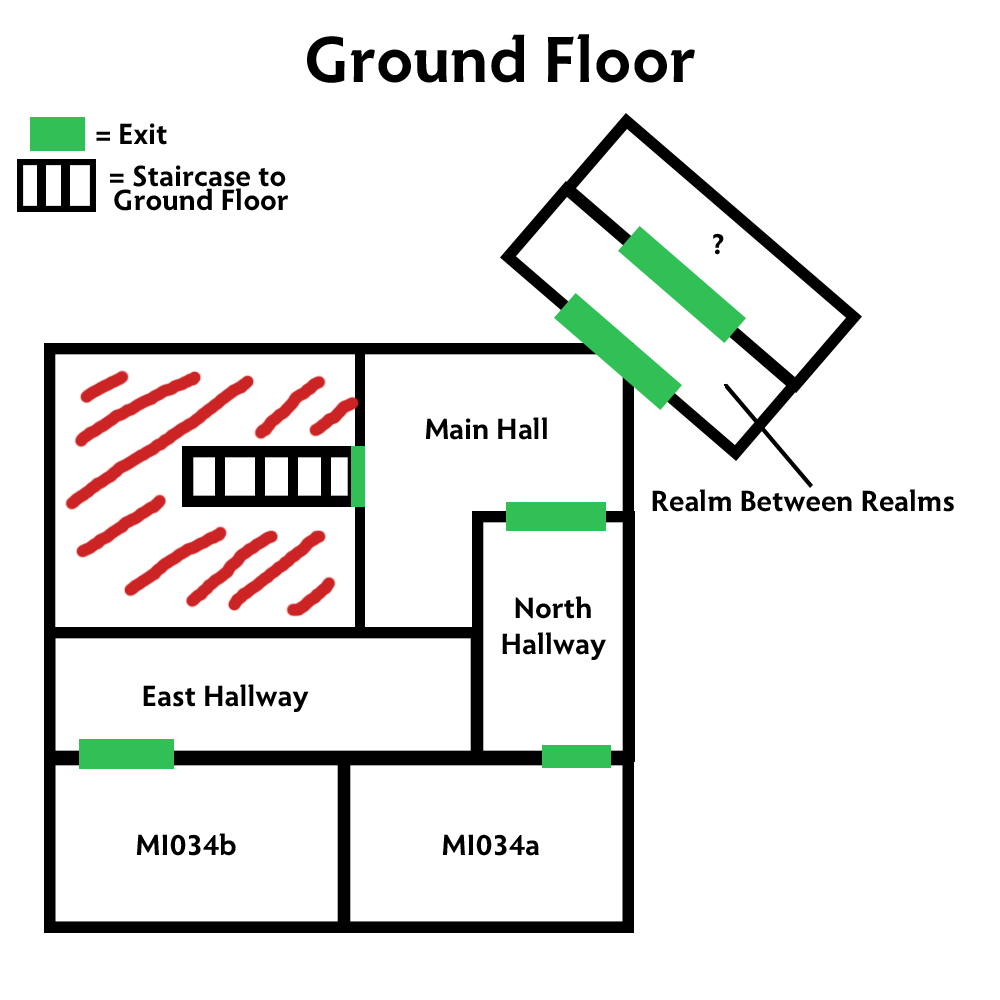
<style>
.page{position:relative;width:1000px;height:1000px;background:#ffffff}
.page>*{position:absolute;margin:0}
.t1{font:67px "Radiance-Bold";color:#000000}
.t2{font:30px "Radiance-Bold";color:#000000}
.t3{font:30px/24px "Radiance-Bold";color:#000000}
</style>
<div class="page">
<p class="t1" style="left:307px;top:34px;width:388px;height:49px">Ground Floor</p>
<p class="t2" style="left:96px;top:123px;width:71px;height:22px">= Exit</p>
<p class="t3" style="left:110px;top:165px;width:178px;height:46px;text-align:center">= Staircase to<br> Ground Floor</p>
<p class="t2" style="left:713px;top:233px;width:11px;height:22px">?</p>
<p class="t2" style="left:425px;top:417px;width:122px;height:23px">Main Hall</p>
<p class="t2" style="left:652px;top:489px;width:302px;height:23px">Realm Between Realms</p>
<p class="t2" style="left:502px;top:596px;width:104px;height:64px;text-align:center">North <br>Hallway</p>
<p class="t2" style="left:143px;top:684px;width:166px;height:28px">East Hallway</p>
<p class="t2" style="left:136px;top:833px;width:100px;height:23px">MI034b</p>
<p class="t2" style="left:442px;top:834px;width:97px;height:22px">MI034a</p>
</div>
